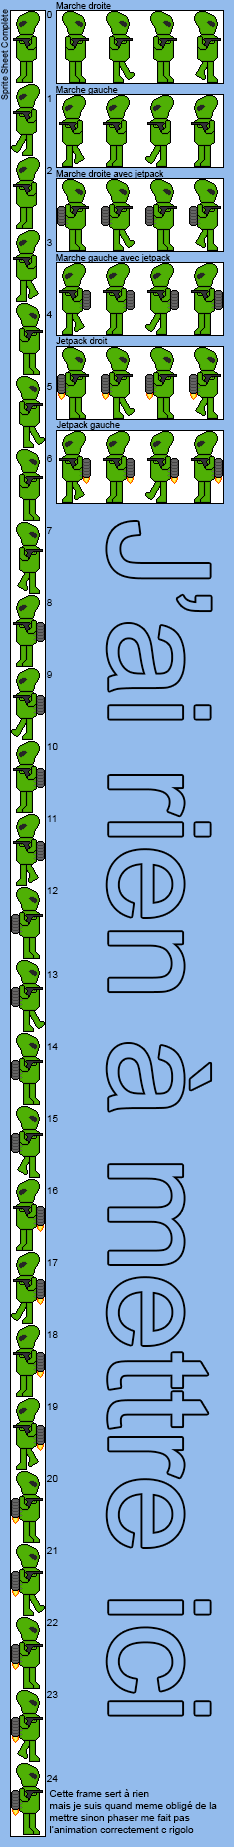
<style>
.page{position:relative;width:234px;height:1847px;background:#93bbec}
.page>*{position:absolute;margin:0}
.t1{font:9px "ArialMT";color:#000000}
.t2{font:9px "ArialMT"}
.t3{font:10px "ArialMT";color:#000000}
</style>
<div class="page">
<p class="t1" style="left:56px;top:2px;width:55px;height:7px">Marche droite</p>
<p class="t2" style="left:1px;top:9px;width:9px;height:91px;rotate:-90deg">Sprite Sheet Complète</p>
<p class="t3" style="left:46px;top:11px;width:12px;height:1771px">0<br><br><br><br><br><br><br>1<br><br><br><br><br><br>2<br><br><br><br><br><br>3<br><br><br><br><br><br>4<br><br><br><br><br><br>5<br><br><br><br><br><br>6<br><br><br><br><br><br>7<br><br><br><br><br><br>8<br><br><br><br><br><br>9<br><br><br><br><br><br>10<br><br><br><br><br><br>11<br><br><br><br><br><br>12<br><br><br><br><br><br><br>13<br><br><br><br><br><br>14<br><br><br><br><br><br>15<br><br><br><br><br><br>16<br><br><br><br><br><br>17<br><br><br><br><br><br>18<br><br><br><br><br><br>19<br><br><br><br><br><br>20<br><br><br><br><br><br>21<br><br><br><br><br><br>22<br><br><br><br><br><br>23<br><br><br><br><br><br><br>24</p>
<p class="t1" style="left:56px;top:86px;width:62px;height:9px">Marche gauche</p>
<p class="t1" style="left:56px;top:170px;width:108px;height:9px">Marche droite avec jetpack</p>
<p class="t1" style="left:56px;top:254px;width:114px;height:9px">Marche gauche avec jetpack</p>
<p class="t1" style="left:56px;top:337px;width:52px;height:9px">Jetpack droit</p>
<p class="t1" style="left:56px;top:421px;width:64px;height:9px">Jetpack gauche</p>
<p class="t3" style="left:49px;top:1789px;width:168px;height:46px">Cette frame sert à rien<br>mais je suis quand meme obligé de la<br>mettre sinon phaser me fait pas<br>l’animation correctement c rigolo</p>
</div>
